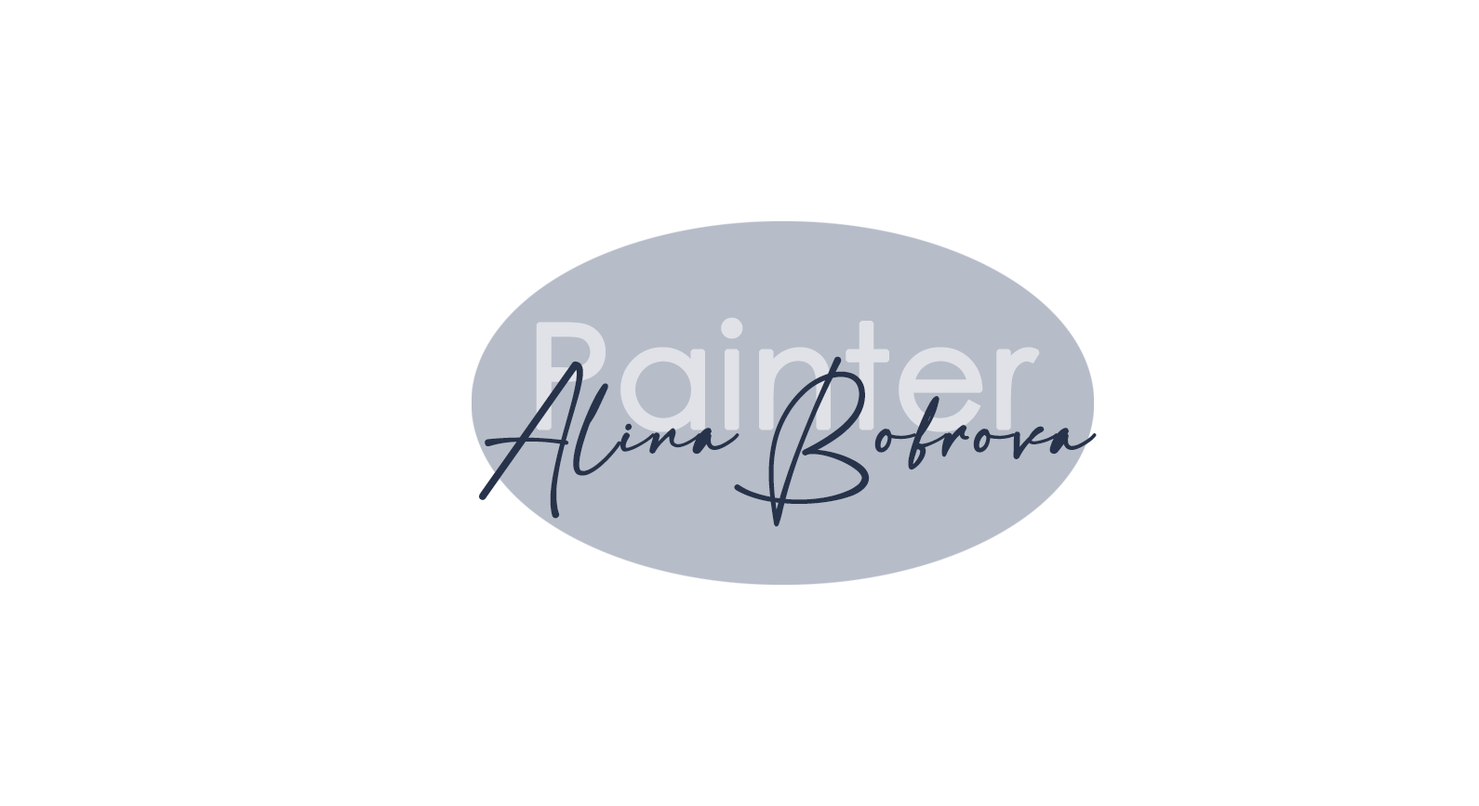
<style>
.page{position:relative;width:1479px;height:806px;background:#ffffff}
.page>*{position:absolute;margin:0}
.t1{font:143.7px "CenturyGothic";color:#e0e2e7;font-weight:bold}
.t2{font:105px "mr_HamiltoneG";color:#27334a;font-weight:bold}
</style>
<div class="page">
<p class="t1" style="left:536px;top:317px;width:504px;height:115px">Painter</p>
<p class="t2" style="left:479px;top:356px;width:618px;height:171px">Alina Bobrova</p>
</div>
